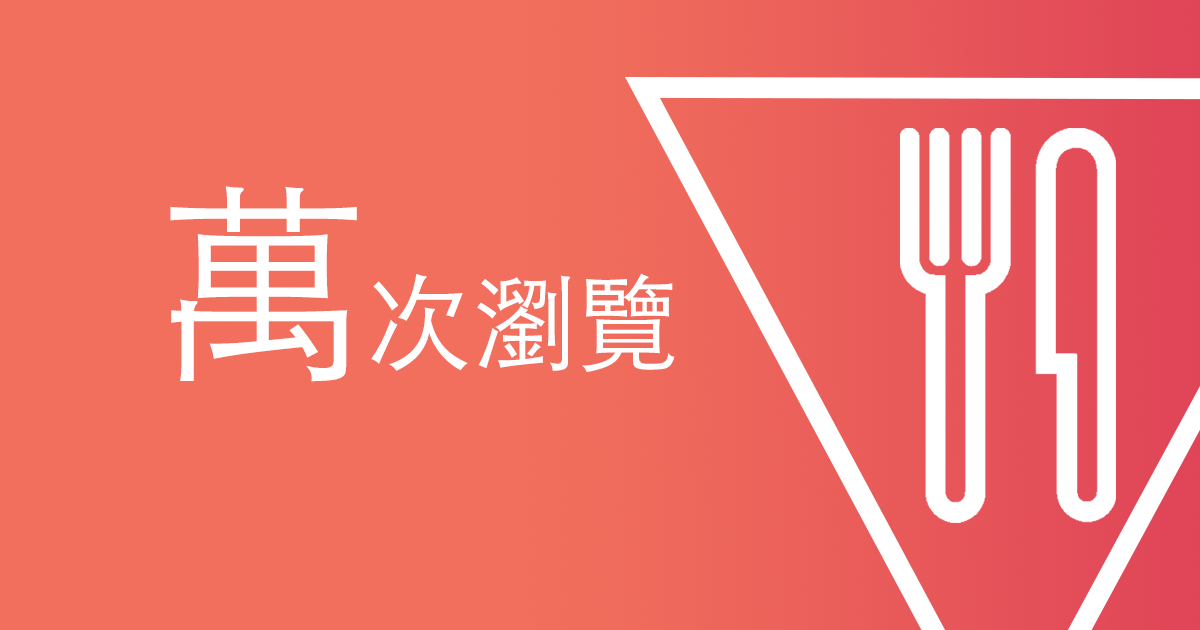
<style>
.page{position:relative;width:1200px;height:630px;background:#f16f5c}
.page>*{position:absolute;margin:0}
.t1{font:106.7px "STHeitiTC-Light";letter-spacing:-0.02em;color:#ffffff}
.t2{font:213.3px "STHeitiTC-Light";letter-spacing:-0.02em;color:#ffffff}
</style>
<div class="page">
<p class="t1" style="left:170px;top:186px;width:505px;height:196px"><span class="t2">萬</span>次瀏覽</p>
</div>
